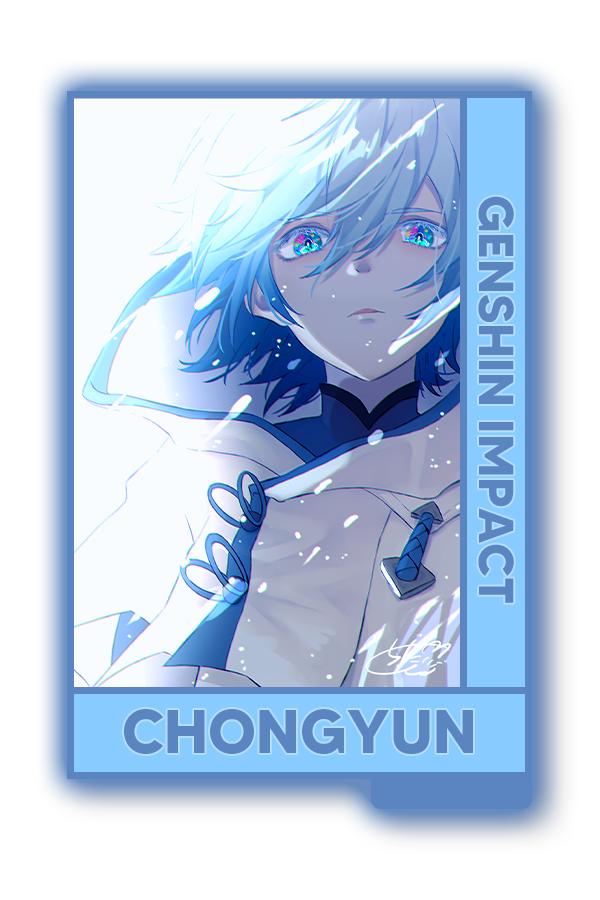
<style>
.page{position:relative;width:600px;height:900px;background:#ffffff}
.page>*{position:absolute;margin:0}
.t1{font:48.8px "MADETOMMY-Bold";color:#5a85c0}
.t2{font:61.5px "MADETOMMY-Bold";color:#5a85c0}
</style>
<div class="page">
<p class="t1" style="left:478px;top:196px;width:36px;height:407px;rotate:90deg">GENSHIN IMPACT</p>
<p class="t2" style="left:124px;top:709px;width:349px;height:45px">CHONGYUN</p>
</div>
